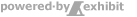
<style>
.page{position:relative;width:137px;height:17px;background:#ffffff}
.page>*{position:absolute;margin:0}
.t1{font:11px "Verdana-Bold";letter-spacing:-0.025em;color:#a7a7a7}
</style>
<div class="page">
<p class="t1" style="left:1px;top:1px;width:69px;height:12px">powered·by</p>
<p class="t1" style="left:83px;top:1px;width:41px;height:10px">exhibit</p>
</div>
